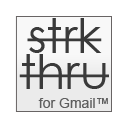
<style>
.page{position:relative;width:128px;height:128px;background:#ffffff}
.page>*{position:absolute;margin:0}
.t1{font:48px "CenturyGothic";color:#3a3a3a}
.t2{font:48px/36px "CenturyGothic";color:#3a3a3a}
.t3{font:14px "ArialMT";color:#5e5e5e}
</style>
<div class="page">
<p class="t1" style="left:19px;top:18px;width:90px;height:71px;text-align:center">strk<br><span class="t2">thru</span></p>
<p class="t3" style="left:38px;top:98px;width:70px;height:10px">for Gmail™</p>
</div>
